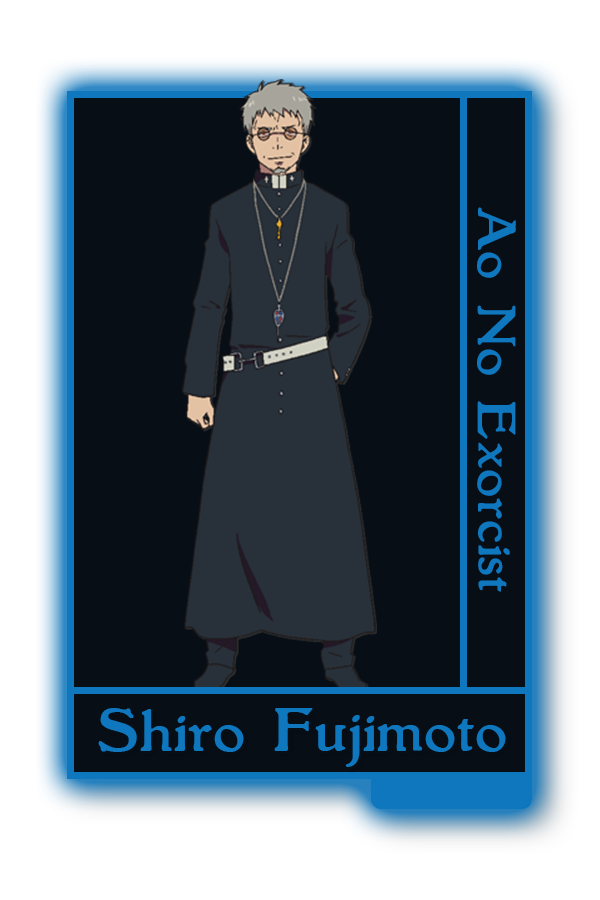
<style>
.page{position:relative;width:600px;height:900px;background:#070e16}
.page>*{position:absolute;margin:0}
.t1{font:48.8px "Grantham-Roman";color:#0f77be}
.t2{font:55.4px "Grantham-Roman";color:#0f77be}
</style>
<div class="page">
<p class="t1" style="left:477px;top:207px;width:39px;height:385px;rotate:90deg">Ao No Exorcist</p>
<p class="t2" style="left:98px;top:708px;width:408px;height:59px">Shiro Fujimoto</p>
</div>
